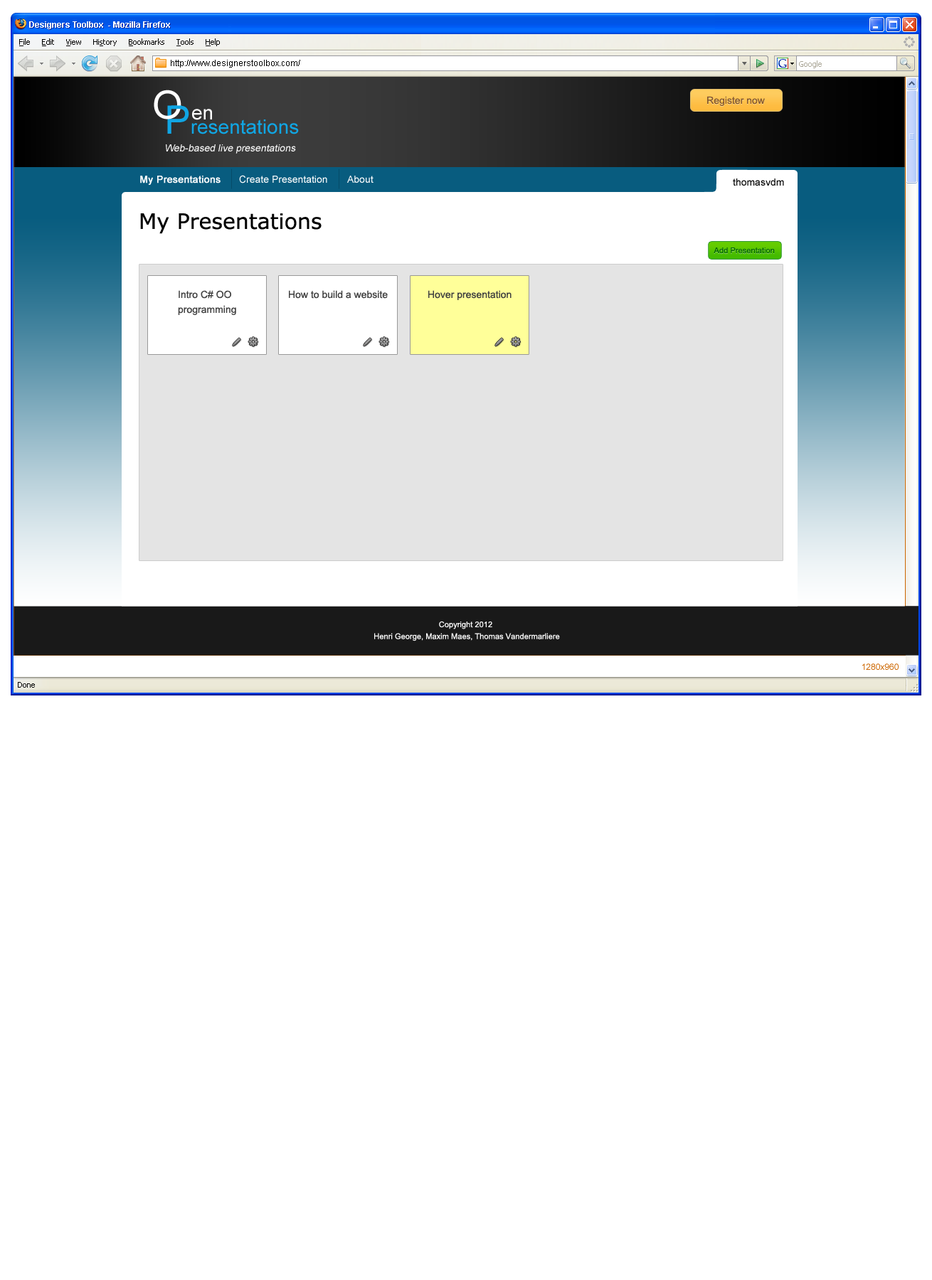
<style>
.page{position:relative;width:932px;height:1280px;background:#ffffff}
.page>*{position:absolute;margin:0}
.t1{font:8.5px "Arial-BoldMT";color:#ffffff}
.t2{font:8.5px "ArialMT";color:#000000}
.t3{font:39.1px "ArialMT";color:#ffffff}
.t4{font:10px "ArialMT";color:#85592e}
.t5{font:19.9px "ArialMT";color:#10a6e4}
.t6{font:39.1px "ArialMT";color:#10a6e4}
.t7{font:19.9px "ArialMT";color:#ffffff}
.t8{font:10px "ArialMT";color:#fdfdfd;font-style:italic}
.t9{font:10px "ArialMT";color:#ffffff;font-weight:bold}
.t10{font:10px "ArialMT";color:#ffffff}
.t11{font:10px "ArialMT";color:#000000}
.t12{font:21.3px "Verdana";color:#000000}
.t13{font:7.9px "ArialMT";color:#006600}
.t14{font:10px/14.9px "ArialMT";color:#404040}
.t15{font:10px "ArialMT";color:#404040}
.t16{font:7.9px/11.9px "ArialMT";color:#ffffff}
.t17{font:8.5px "ArialMT";color:#cc6600}
</style>
<div class="page">
<p class="t1" style="left:29px;top:21px;width:141px;height:8px">Designers Toolbox  - Mozilla Firefox</p>
<p class="t2" style="left:171px;top:60px;width:129px;height:8px">http://www.designerstoolbox.com/</p>
<p class="t3" style="left:154px;top:90px;width:27px;height:29px">O</p>
<p class="t4" style="left:707px;top:96px;width:57px;height:10px">Register now</p>
<p class="t5" style="left:167px;top:105px;width:132px;height:29px"><span class="t6">P</span>resentations</p>
<p class="t7" style="left:192px;top:109px;width:20px;height:11px">en</p>
<p class="t8" style="left:166px;top:144px;width:130px;height:10px">Web-based live presentations</p>
<p class="t9" style="left:140px;top:176px;width:80px;height:9px">My Presentations</p>
<p class="t10" style="left:239px;top:175px;width:88px;height:8px">Create Presentation</p>
<p class="t10" style="left:347px;top:176px;width:26px;height:7px">About</p>
<p class="t11" style="left:732px;top:178px;width:52px;height:8px">thomasvdm</p>
<p class="t12" style="left:140px;top:213px;width:181px;height:21px">My Presentations</p>
<p class="t13" style="left:713px;top:247px;width:61px;height:7px">Add Presentation</p>
<p class="t14" style="left:178px;top:290px;width:58px;height:25px">Intro C# OO <br>programming</p>
<p class="t15" style="left:289px;top:290px;width:99px;height:9px">How to build a website</p>
<p class="t15" style="left:428px;top:290px;width:83px;height:10px">Hover presentation</p>
<p class="t16" style="left:374px;top:621px;width:186px;height:20px;text-align:center">Copyright 2012 <br>Henri George, Maxim Maes, Thomas Vandermarliere</p>
<p class="t17" style="left:862px;top:663px;width:36px;height:7px">1280x960</p>
</div>
